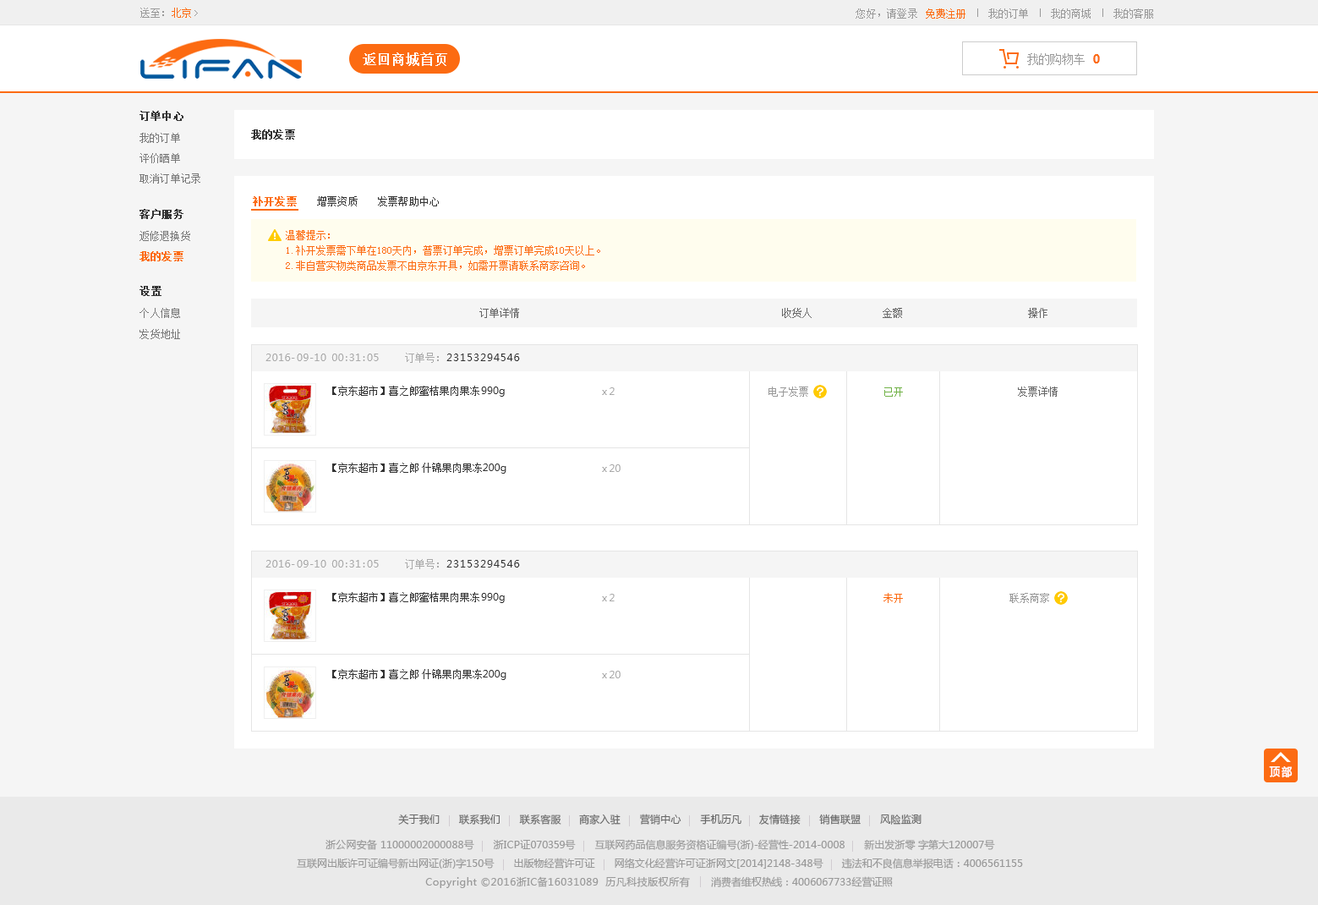
<style>
.page{position:relative;width:1318px;height:905px;background:#ffffff}
.page>*{position:absolute;margin:0}
.t1{font:9.9px "SimSun";letter-spacing:0.02em;color:#999999}
.t2{font:9.9px "SimSun";letter-spacing:0.02em;color:#fc6b12}
.t3{font:10.4px "SimSun";letter-spacing:0.02em;color:#999999}
.t4{font:10.4px "SimSun";letter-spacing:0.02em;color:#fc6b12}
.t5{font:13.5px "SimSun";color:#ffffff;font-weight:bold}
.t6{font:11.8px "SimSun";letter-spacing:-0.06em;color:#999999}
.t7{font:11.8px "MicrosoftYaHei-Bold";letter-spacing:-0.06em;color:#fc6b12}
.t8{font:10.2px "SimSun";color:#333333;font-weight:bold}
.t9{font:10.2px "SimSun";color:#777777}
.t10{font:10.2px "SimSun";color:#fc6b12;font-weight:bold}
.t11{font:10.2px "SimSun";color:#333333}
.t12{font:10.1px/15.2px "SimSun";color:#fc6b12}
.t13{font:10.3px "SimSun";color:#333333;font-weight:bold}
.t14{font:10.3px "SimSun";color:#777777}
.t15{font:10.1px "SimSun";color:#666666}
.t16{font:10.1px "MicrosoftYaHei";letter-spacing:0.04em;color:#aaaaaa}
.t17{font:10.1px "SimSun";color:#aaaaaa}
.t18{font:10.1px "MicrosoftYaHei";letter-spacing:0.08em;color:#333333}
.t19{font:10.1px "SimSun";color:#333333}
.t20{font:10.1px "MicrosoftYaHei";color:#333333}
.t21{font:10.1px "MicrosoftYaHei";color:#aaaaaa}
.t22{font:10.1px "SimSun";color:#999999}
.t23{font:10.1px "SimSun";color:#71b247}
.t24{font:10.1px "SimSun";color:#fc6b12}
.t25{font:11.2px "MicrosoftYaHei";color:#ffffff;font-weight:bold;scale:0.91 1}
.t26{font:10.1px "MicrosoftYaHei";letter-spacing:0.02em;color:#666666}
.t27{font:10.1px "MicrosoftYaHei";color:#999999}
.t28{font:10.1px "MicrosoftYaHei";letter-spacing:0.02em;color:#999999}
.t29{font:10.1px "MicrosoftYaHei";letter-spacing:-0.02em;color:#999999}
.t30{font:10.1px "MicrosoftYaHei";letter-spacing:0.04em;color:#999999}
</style>
<div class="page">
<p class="t1" style="left:140px;top:8px;width:51px;height:10px">送至：<span class="t2">北京</span></p>
<p class="t3" style="left:856px;top:8px;width:61px;height:11px">您好，请登录</p>
<p class="t4" style="left:926px;top:8px;width:40px;height:11px">免费注册</p>
<p class="t3" style="left:988px;top:8px;width:40px;height:11px">我的订单</p>
<p class="t3" style="left:1051px;top:8px;width:40px;height:11px">我的商城</p>
<p class="t3" style="left:1113px;top:8px;width:40px;height:11px">我的客服</p>
<p class="t5" style="left:363px;top:52px;width:84px;height:14px">返回商城首页</p>
<p class="t6" style="left:1027px;top:53px;width:58px;height:12px">我的购物车</p>
<p class="t7" style="left:1093px;top:54px;width:7px;height:9px">0</p>
<p class="t8" style="left:140px;top:111px;width:43px;height:10px">订单中心</p>
<p class="t9" style="left:140px;top:133px;width:40px;height:10px">我的订单</p>
<p class="t8" style="left:251px;top:129px;width:44px;height:11px">我的发票</p>
<p class="t9" style="left:140px;top:153px;width:40px;height:10px">评价晒单</p>
<p class="t9" style="left:140px;top:173px;width:60px;height:10px">取消订单记录</p>
<p class="t10" style="left:253px;top:196px;width:44px;height:10px">补开发票</p>
<p class="t11" style="left:317px;top:196px;width:41px;height:10px">增票资质</p>
<p class="t11" style="left:378px;top:196px;width:61px;height:10px">发票帮助中心</p>
<p class="t8" style="left:140px;top:209px;width:43px;height:10px">客户服务</p>
<p class="t9" style="left:140px;top:231px;width:50px;height:10px">返修退换货</p>
<p class="t12" style="left:286px;top:230px;width:314px;height:41px">温馨提示： <br>1.补开发票需下单在180天内，普票订单完成，增票订单完成10天以上。 <br>2.非自营实物类商品发票不由京东开具，如需开票请联系商家咨询。</p>
<p class="t10" style="left:140px;top:251px;width:43px;height:10px">我的发票</p>
<p class="t13" style="left:140px;top:286px;width:21px;height:10px">设置</p>
<p class="t14" style="left:140px;top:308px;width:40px;height:10px">个人信息</p>
<p class="t15" style="left:479px;top:308px;width:40px;height:10px">订单详情</p>
<p class="t15" style="left:782px;top:308px;width:30px;height:10px">收货人</p>
<p class="t15" style="left:883px;top:308px;width:19px;height:10px">金额</p>
<p class="t15" style="left:1028px;top:308px;width:20px;height:10px">操作</p>
<p class="t14" style="left:140px;top:329px;width:40px;height:10px">发货地址</p>
<p class="t16" style="left:265px;top:353px;width:114px;height:8px">2016-09-10 00:31:05</p>
<p class="t17" style="left:405px;top:353px;width:34px;height:10px">订单号：</p>
<p class="t18" style="left:446px;top:353px;width:74px;height:8px">23153294546</p>
<p class="t19" style="left:332px;top:386px;width:173px;height:11px">【京东超市】喜之郎蜜桔果肉果冻<span class="t20">990g</span></p>
<p class="t21" style="left:602px;top:387px;width:13px;height:8px">x 2</p>
<p class="t22" style="left:769px;top:386px;width:39px;height:11px">电子发票</p>
<p class="t23" style="left:884px;top:387px;width:19px;height:10px">已开</p>
<p class="t15" style="left:1018px;top:386px;width:40px;height:11px">发票详情</p>
<p class="t19" style="left:332px;top:462px;width:174px;height:11px">【京东超市】喜之郎 什锦果肉果冻<span class="t20">200g</span></p>
<p class="t21" style="left:602px;top:464px;width:19px;height:8px">x 20</p>
<p class="t16" style="left:265px;top:560px;width:114px;height:7px">2016-09-10 00:31:05</p>
<p class="t17" style="left:405px;top:559px;width:34px;height:10px">订单号：</p>
<p class="t18" style="left:446px;top:560px;width:74px;height:7px">23153294546</p>
<p class="t19" style="left:332px;top:592px;width:173px;height:11px">【京东超市】喜之郎蜜桔果肉果冻<span class="t20">990g</span></p>
<p class="t21" style="left:602px;top:594px;width:13px;height:7px">x 2</p>
<p class="t24" style="left:884px;top:593px;width:19px;height:10px">未开</p>
<p class="t22" style="left:1009px;top:593px;width:40px;height:10px">联系商家</p>
<p class="t19" style="left:332px;top:669px;width:174px;height:11px">【京东超市】喜之郎 什锦果肉果冻<span class="t20">200g</span></p>
<p class="t21" style="left:602px;top:670px;width:19px;height:8px">x 20</p>
<p class="t25" style="left:1269px;top:766px;width:24px;height:12px">顶 部</p>
<p class="t26" style="left:398px;top:813px;width:524px;height:11px">关于我们      联系我们      联系客服     商家入驻      营销中心      手机历凡     友情链接      销售联盟      风险监测</p>
<p class="t27" style="left:326px;top:839px;width:669px;height:11px"><span class="t28">浙公网安备 </span>11000002000088<span class="t28">号      浙ICP证</span><span class="t29">070359号     </span>互联网药品信息服务资格证编号(<span class="t28">浙</span>)-经营性-2014-0008      新出发<span class="t28">浙</span>零 字第大120007号</p>
<p class="t27" style="left:297px;top:857px;width:726px;height:11px">互联网出版许可证编号新出网证(<span class="t28">浙</span>)字150号       出版物经营许可证       网络文化经营许可证<span class="t28">浙</span>网文[2014]2148-348号       违法和不良信息举报电话：4006561155</p>
<p class="t30" style="left:425px;top:876px;width:468px;height:12px"><span class="t27"><br><br></span>Copyright ©2016浙IC备16031089  历凡科技版权所有<span class="t27">       消费者维权热线：4006067733经营证照</span></p>
</div>
